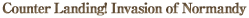
<style>
.page{position:relative;width:249px;height:18px;background:#ffffff}
.page>*{position:absolute;margin:0}
.t1{font:14px "RyuminPro-ExBold";letter-spacing:-0.08em;color:#69543c;font-weight:bold}
</style>
<div class="page">
<p class="t1" style="left:2px;top:2px;width:245px;height:14px">Counter Landing! Invasion of Normandy</p>
</div>
